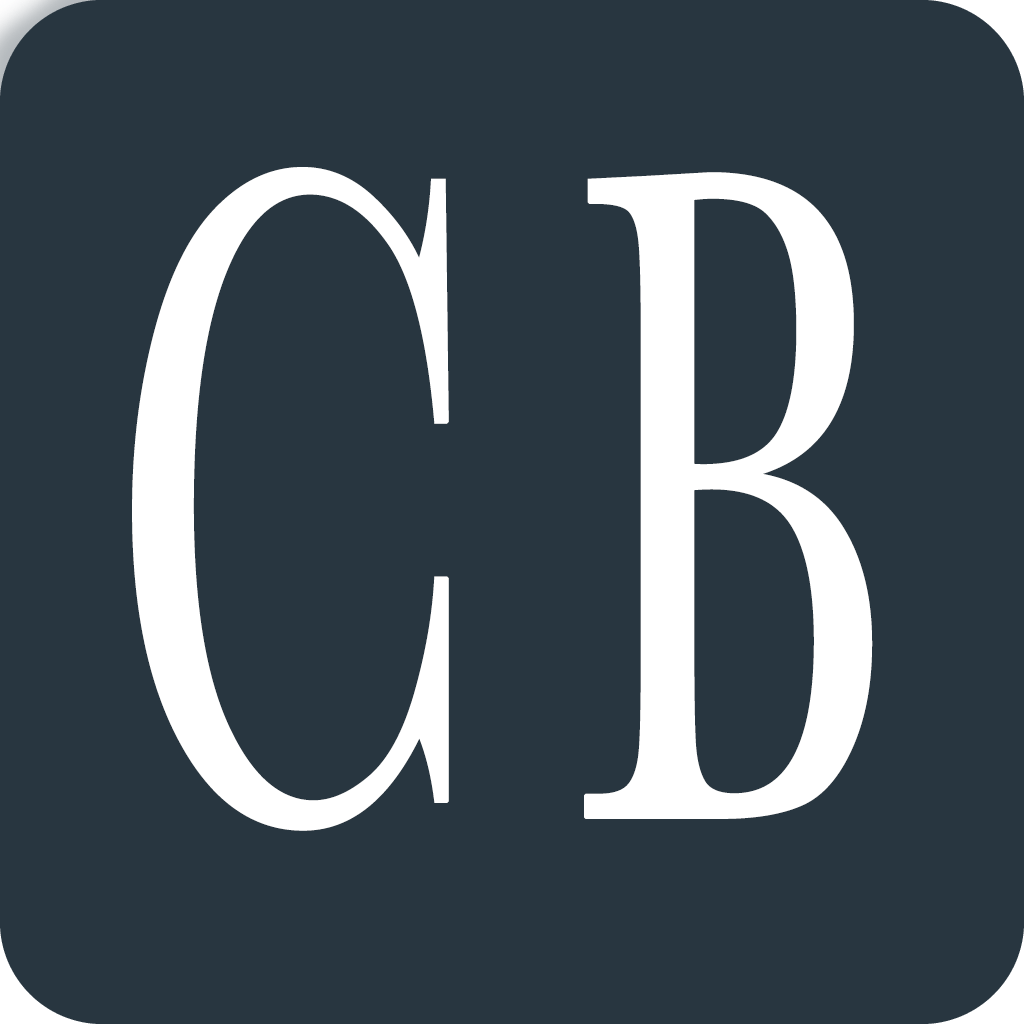
<style>
.page{position:relative;width:1024px;height:1024px;background:#283640}
.page>*{position:absolute;margin:0}
.t1{font:961.5px "Baskerville";letter-spacing:0.15em;color:#ffffff;font-weight:bold;scale:0.54 1}
</style>
<div class="page">
<p class="t1" style="left:132px;top:167px;width:741px;height:664px">CB</p>
</div>
